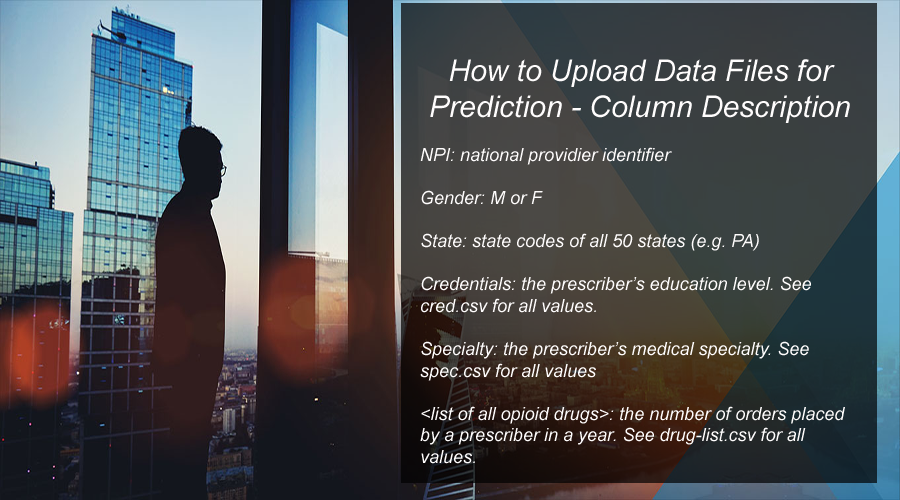
<style>
.page{position:relative;width:900px;height:500px}
.page>*{position:absolute;margin:0}
.t1{font:18px "Arial-ItalicMT";color:#fffdfd}
.t2{font:30px "Arial-ItalicMT";color:#fffdfd}
</style>
<div class="page">
<p class="t1" style="left:420px;top:59px;width:430px;height:405px;text-align:center"><span class="t2"><br>How to Upload Data Files for Prediction - Column Description<br></span><br>NPI: national providier identifier<br><br>Gender: M or F<br><br>State: state codes of all 50 states (e.g. PA)<br><br>Credentials: the prescriber’s education level. See cred.csv for all values.<br><br>Specialty: the prescriber’s medical specialty. See spec.csv for all values<br><br>&lt;list of all opioid drugs&gt;: the number of orders placed by a prescriber in a year. See drug-list.csv for all values.</p>
</div>
